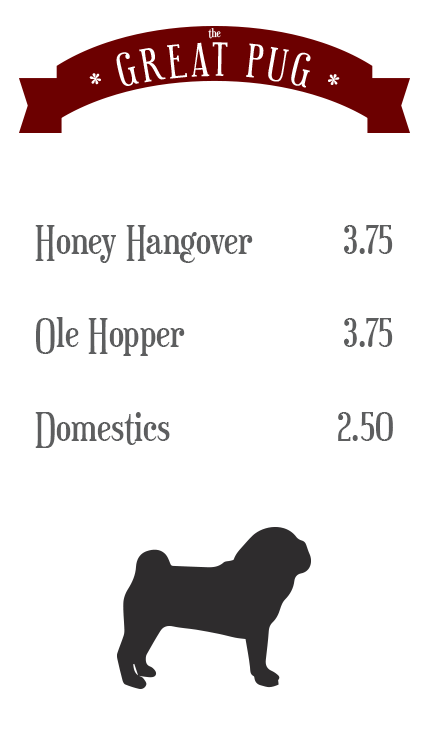
<style>
.page{position:relative;width:429px;height:755px;background:#ffffff}
.page>*{position:absolute;margin:0}
.t1{font:38.8px "Euphorigenic-Regular";color:#5d5e5f}
</style>
<div class="page">
<p class="t1" style="left:35px;top:225px;width:218px;height:223px">Honey Hangover<br><br>Ole Hopper<br><br>Domestics</p>
<p class="t1" style="left:338px;top:225px;width:55px;height:216px;text-align:right">3.75<br><br>3.75<br><br>2.50</p>
</div>
